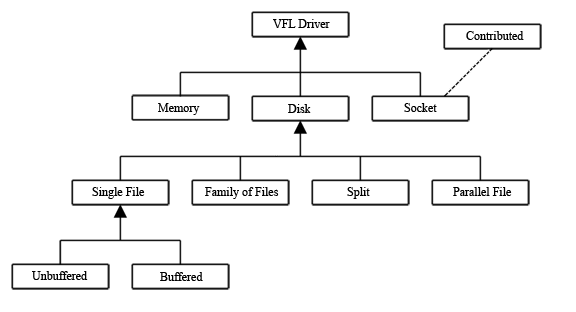
<style>
.page{position:relative;width:576px;height:312px;background:#ffffff}
.page>*{position:absolute;margin:0}
.t1{font:12px "TimesNewRomanPSMT";color:#000000}
</style>
<div class="page">
<p class="t1" style="left:273px;top:19px;width:57px;height:9px">VFL Driver</p>
<p class="t1" style="left:466px;top:31px;width:58px;height:9px">Contributed</p>
<p class="t1" style="left:158px;top:103px;width:42px;height:12px">Memory</p>
<p class="t1" style="left:288px;top:104px;width:23px;height:9px">Disk</p>
<p class="t1" style="left:404px;top:103px;width:33px;height:9px">Socket</p>
<p class="t1" style="left:92px;top:187px;width:53px;height:12px">Single File</p>
<p class="t1" style="left:205px;top:187px;width:74px;height:12px">Family of Files</p>
<p class="t1" style="left:347px;top:187px;width:23px;height:12px">Split</p>
<p class="t1" style="left:453px;top:187px;width:59px;height:9px">Parallel File</p>
<p class="t1" style="left:32px;top:271px;width:56px;height:9px">Unbuffered</p>
<p class="t1" style="left:160px;top:272px;width:43px;height:9px">Buffered</p>
</div>
